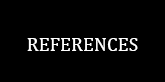
<style>
.page{position:relative;width:165px;height:82px;background:#000000}
.page>*{position:absolute;margin:0}
.t1{font:19.1px "Cambria";color:#ffffff}
</style>
<div class="page">
<p class="t1" style="left:27px;top:38px;width:111px;height:13px">REFERENCES</p>
</div>
